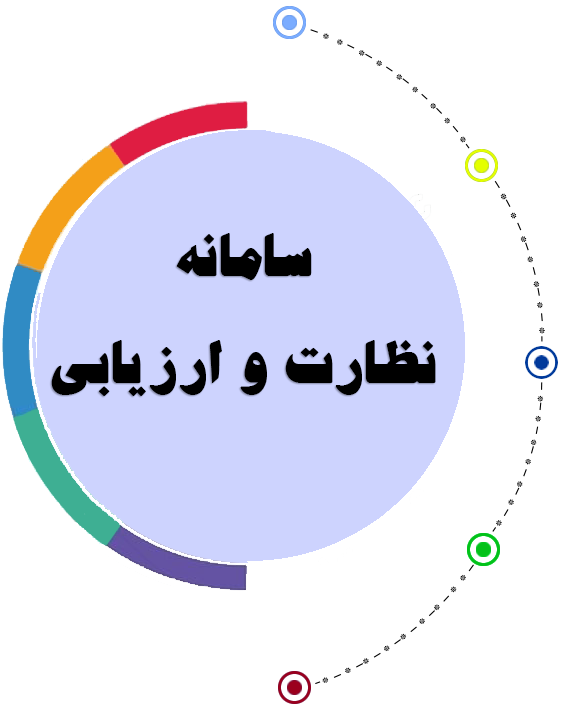
<style>
.page{position:relative;width:563px;height:707px;background:#ffffff}
.page>*{position:absolute;margin:0}
.t1{font:59.5px/107px "BJadidBold";color:#000000}
</style>
<div class="page">
<p class="t1" style="left:51px;top:233px;width:385px;height:163px;text-align:center">سامانه<br>نظارت و ارزیابی</p>
</div>
